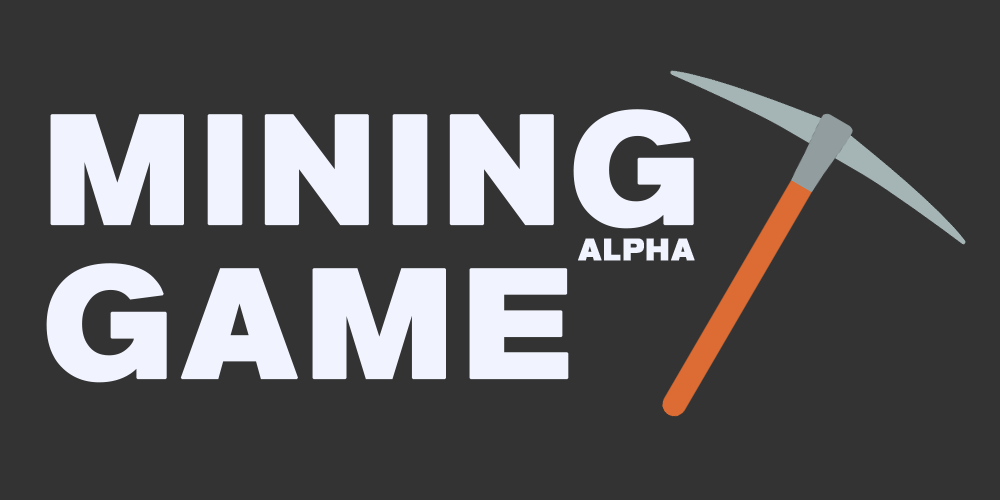
<style>
.page{position:relative;width:1000px;height:500px;background:#333333}
.page>*{position:absolute;margin:0}
.t1{font:153.6px "THE_DONALD";letter-spacing:0.05em;color:#f1f4fe;font-weight:bold;scale:0.83 1}
.t2{font:30.6px "THE_DONALD";letter-spacing:0.05em;color:#f1f4fe;font-weight:bold;scale:0.83 1}
</style>
<div class="page">
<p class="t1" style="left:46px;top:109px;width:648px;height:274px">MINING<br>GAME</p>
<p class="t2" style="left:578px;top:238px;width:117px;height:23px">ALPHA</p>
</div>
